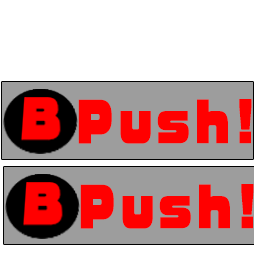
<style>
.page{position:relative;width:254px;height:254px;background:#ffffff}
.page>*{position:absolute;margin:0}
.t1{font:53.6px "VDL-LogoJrBlack-Black";letter-spacing:0.11em;color:#ff0000;scale:0.77 1}
</style>
<div class="page">
<p class="t1" style="left:78px;top:99px;width:174px;height:45px">Push!</p>
</div>
